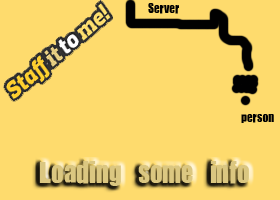
<style>
.page{position:relative;width:280px;height:200px;background:#fedb6d}
.page>*{position:absolute;margin:0}
.t1{font:14.7px "JCHEadA";color:#010101}
.t2{font:32px "JCHEadA";color:#dbc781}
</style>
<div class="page">
<p class="t1" style="left:148px;top:3px;width:31px;height:11px">Server</p>
<p class="t1" style="left:241px;top:114px;width:33px;height:9px">person</p>
<p class="t2" style="left:39px;top:161px;width:210px;height:25px">Loading some info</p>
</div>
